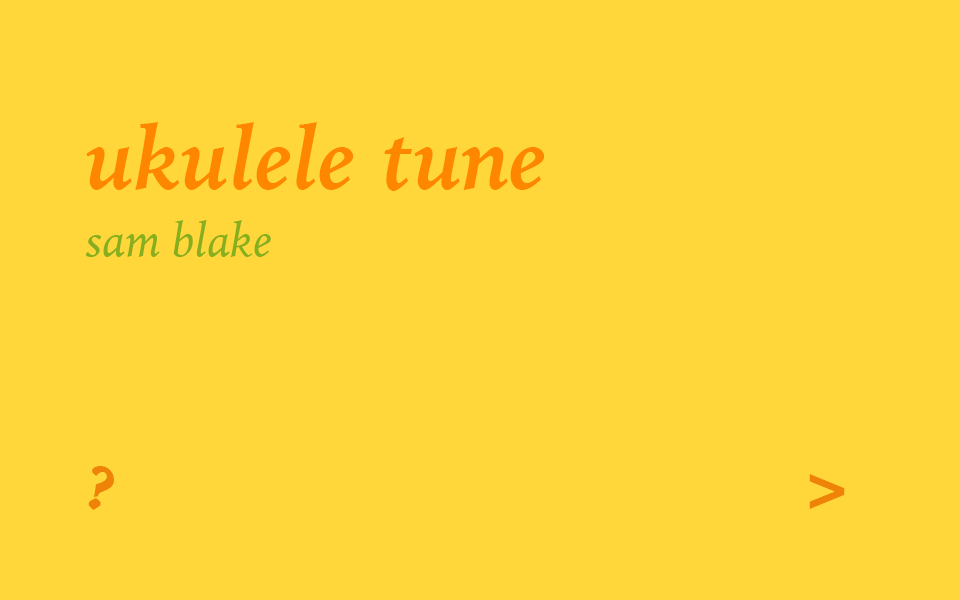
<style>
.page{position:relative;width:960px;height:600px;background:#ffd73b}
.page>*{position:absolute;margin:0}
.t1{font:88px "IowanOldStyle-BoldItalic";color:#ff8700}
.t2{font:48px "IowanOldStyle-Italic";color:#86ae1e}
.t3{font:60px "IowanOldStyle-BlackItalic";color:#ef8308}
</style>
<div class="page">
<p class="t1" style="left:86px;top:122px;width:459px;height:69px">ukulele tune</p>
<p class="t2" style="left:85px;top:220px;width:186px;height:37px">sam blake</p>
<p class="t3" style="left:88px;top:466px;width:26px;height:44px">?</p>
<p class="t3" style="left:809px;top:474px;width:36px;height:35px">&gt;</p>
</div>
